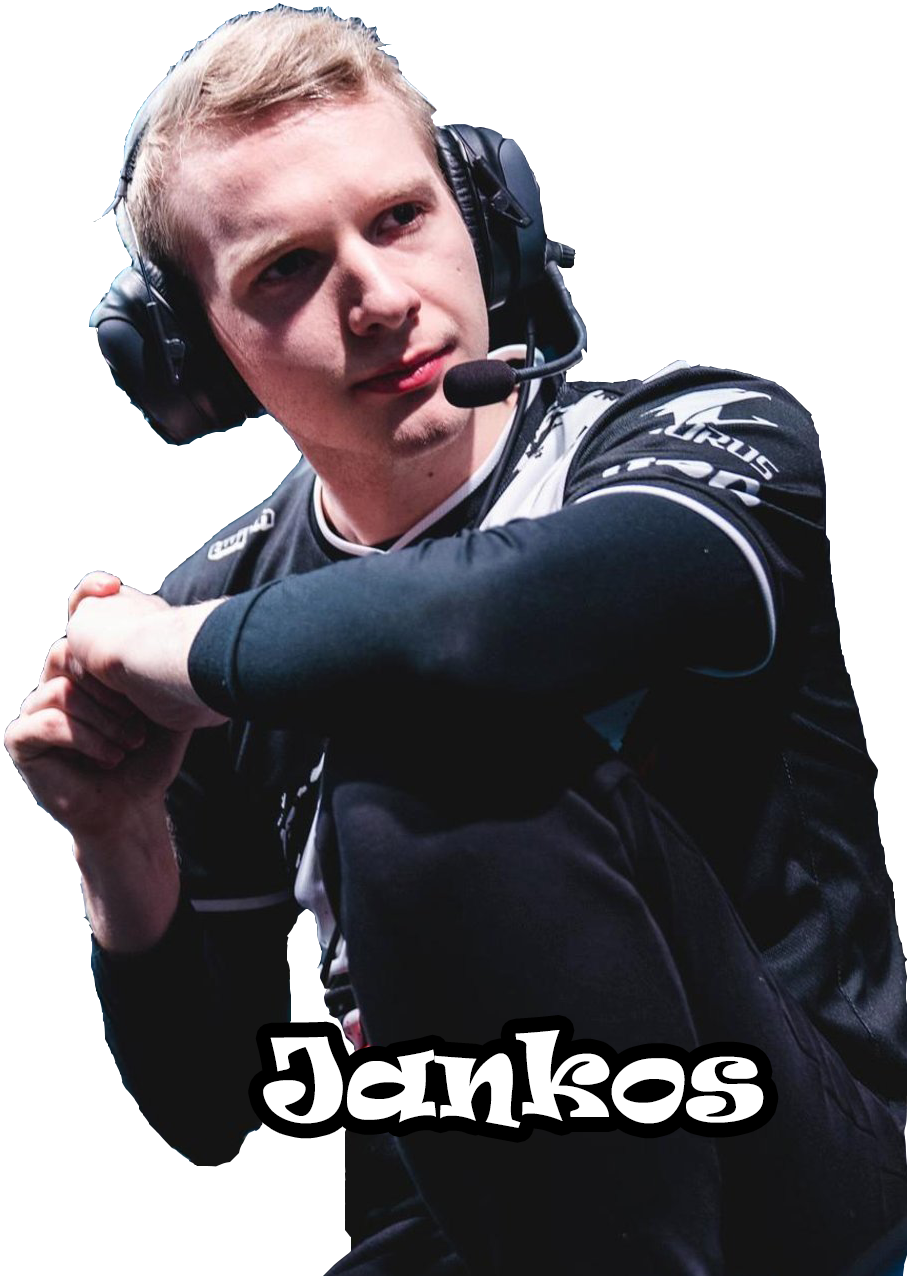
<style>
.page{position:relative;width:907px;height:1278px;background:#ffffff}
.page>*{position:absolute;margin:0}
.t1{font:108px "Ravie";color:#ffffff}
</style>
<div class="page">
<p class="t1" style="left:263px;top:1030px;width:501px;height:98px">Jankos</p>
</div>
